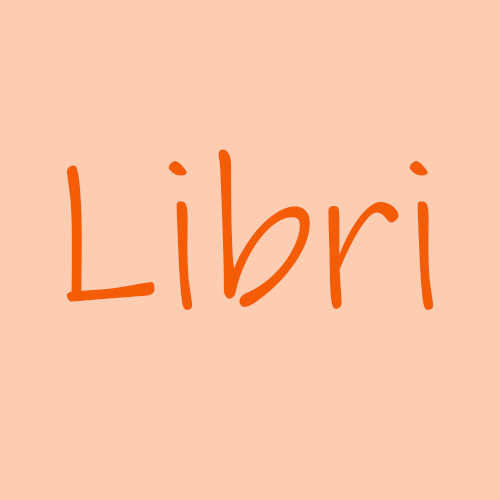
<style>
.page{position:relative;width:500px;height:500px;background:#fdcdb2}
.page>*{position:absolute;margin:0}
.t1{font:211.7px "InkFree";color:#f45d06}
</style>
<div class="page">
<p class="t1" style="left:66px;top:149px;width:368px;height:161px">Libri</p>
</div>
